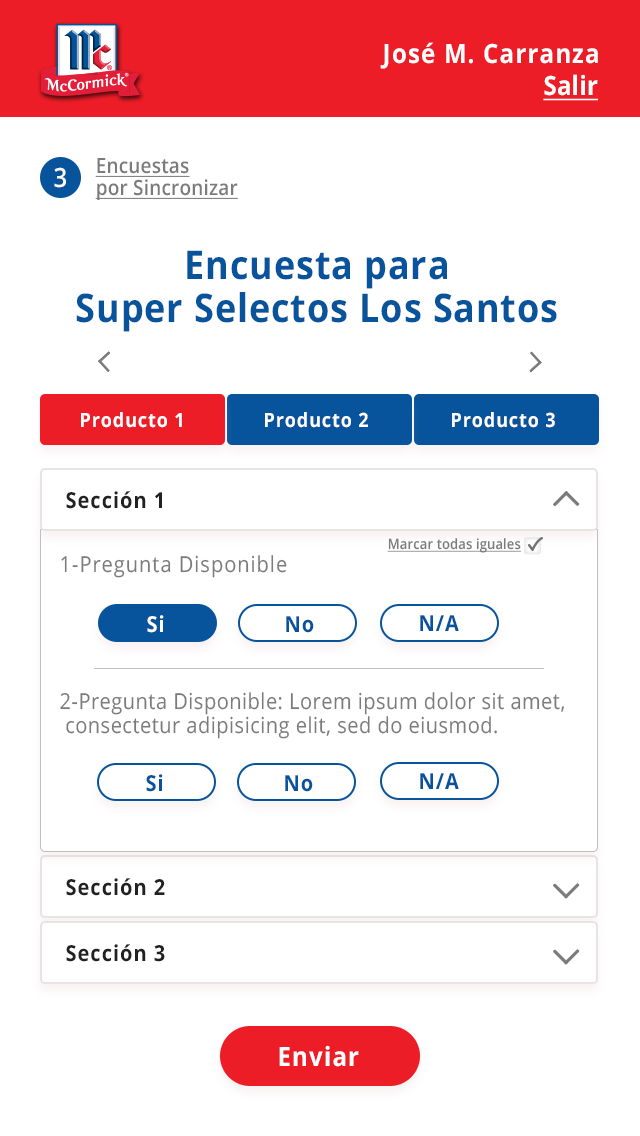
<style>
.page{position:relative;width:640px;height:1136px;background:#ffffff}
.page>*{position:absolute;margin:0}
.t1{font:26.4px "OpenSans-Bold";letter-spacing:0.05em;color:#ffffff;scale:0.91 1}
.t2{font:26.4px "OpenSans-Bold";letter-spacing:0.01em;color:#ffffff;text-decoration:underline;scale:0.91 1}
.t3{font:20.9px/22px "OpenSans-SemiBold";letter-spacing:0.01em;color:#7b7b7b;text-decoration:underline;scale:0.91 1}
.t4{font:26.4px "OpenSans-SemiBold";letter-spacing:0.05em;color:#ffffff;scale:0.91 1}
.t5{font:39.6px "OpenSans-Bold";letter-spacing:0.025em;color:#07549c;scale:0.91 1}
.t6{font:19.8px "OpenSans-Bold";letter-spacing:0.05em;color:#ffffff;scale:0.91 1}
.t7{font:22px "OpenSans-Bold";letter-spacing:0.05em;color:#212121;scale:0.91 1}
.t8{font:14.3px "OpenSans-SemiBold";letter-spacing:0.01em;color:#7b7b7b;text-decoration:underline;scale:0.91 1}
.t9{font:22px "OpenSans-Regular";letter-spacing:0.05em;color:#7b7b7b;scale:0.91 1}
.t10{font:22px "OpenSans-Bold";letter-spacing:0.05em;color:#ffffff;scale:0.91 1}
.t11{font:22px "OpenSans-Bold";letter-spacing:0.05em;color:#07549c;scale:0.91 1}
.t12{font:22px "OpenSans-Regular";letter-spacing:0.025em;color:#7b7b7b;scale:0.91 1}
</style>
<div class="page">
<p class="t1" style="left:380px;top:42px;width:218px;height:27px">José M. Carranza</p>
<p class="t2" style="left:543px;top:74px;width:55px;height:27px">Salir</p>
<p class="t3" style="left:95px;top:158px;width:143px;height:42px">Encuestas<br>por Sincronizar</p>
<p class="t4" style="left:54px;top:167px;width:12px;height:21px">3</p>
<p class="t5" style="left:76px;top:250px;width:481px;height:82px;text-align:center">Encuesta para<br>Super Selectos Los Santos</p>
<p class="t6" style="left:81px;top:412px;width:101px;height:16px">Producto 1</p>
<p class="t6" style="left:265px;top:412px;width:103px;height:16px">Producto 2</p>
<p class="t6" style="left:452px;top:412px;width:103px;height:16px">Producto 3</p>
<p class="t7" style="left:66px;top:491px;width:96px;height:18px">Sección 1</p>
<p class="t8" style="left:387px;top:538px;width:134px;height:15px">Marcar todas iguales</p>
<p class="t9" style="left:61px;top:555px;width:226px;height:23px">1-Pregunta Disponible</p>
<p class="t10" style="left:147px;top:615px;width:17px;height:18px">Si</p>
<p class="t11" style="left:286px;top:616px;width:28px;height:17px">No</p>
<p class="t11" style="left:420px;top:615px;width:39px;height:16px">N/A</p>
<p class="t12" style="left:60px;top:692px;width:504px;height:47px">2-Pregunta Disponible: Lorem ipsum dolor sit amet,<br> consectetur adipisicing elit, sed do eiusmod.</p>
<p class="t11" style="left:146px;top:774px;width:17px;height:18px">Si</p>
<p class="t11" style="left:420px;top:773px;width:39px;height:16px">N/A</p>
<p class="t11" style="left:285px;top:775px;width:28px;height:17px">No</p>
<p class="t7" style="left:66px;top:878px;width:99px;height:18px">Sección 2</p>
<p class="t7" style="left:66px;top:944px;width:99px;height:18px">Sección 3</p>
<p class="t1" style="left:279px;top:1045px;width:80px;height:22px">Enviar</p>
</div>
